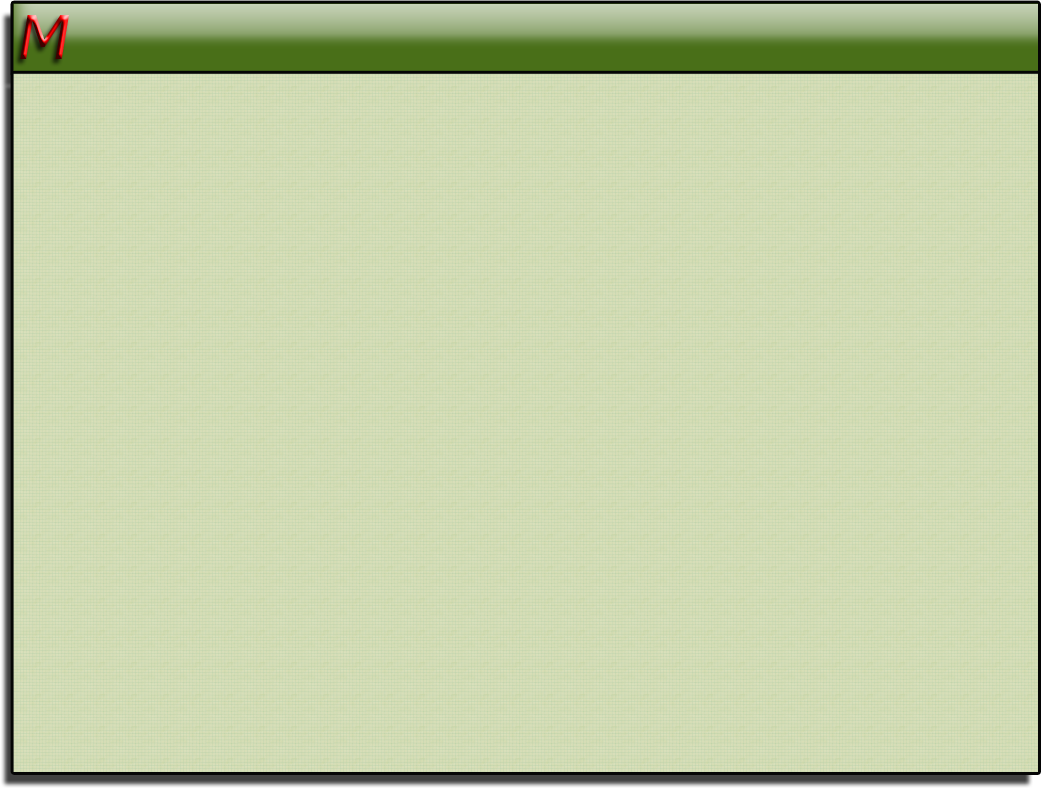
<style>
.page{position:relative;width:1041px;height:788px}
.page>*{position:absolute;margin:0}
.t1{font:61.8px "Verdana";scale:1.04 1}
</style>
<div class="page">
<p class="t1" style="left:20px;top:15px;width:49px;height:44px">M</p>
</div>
